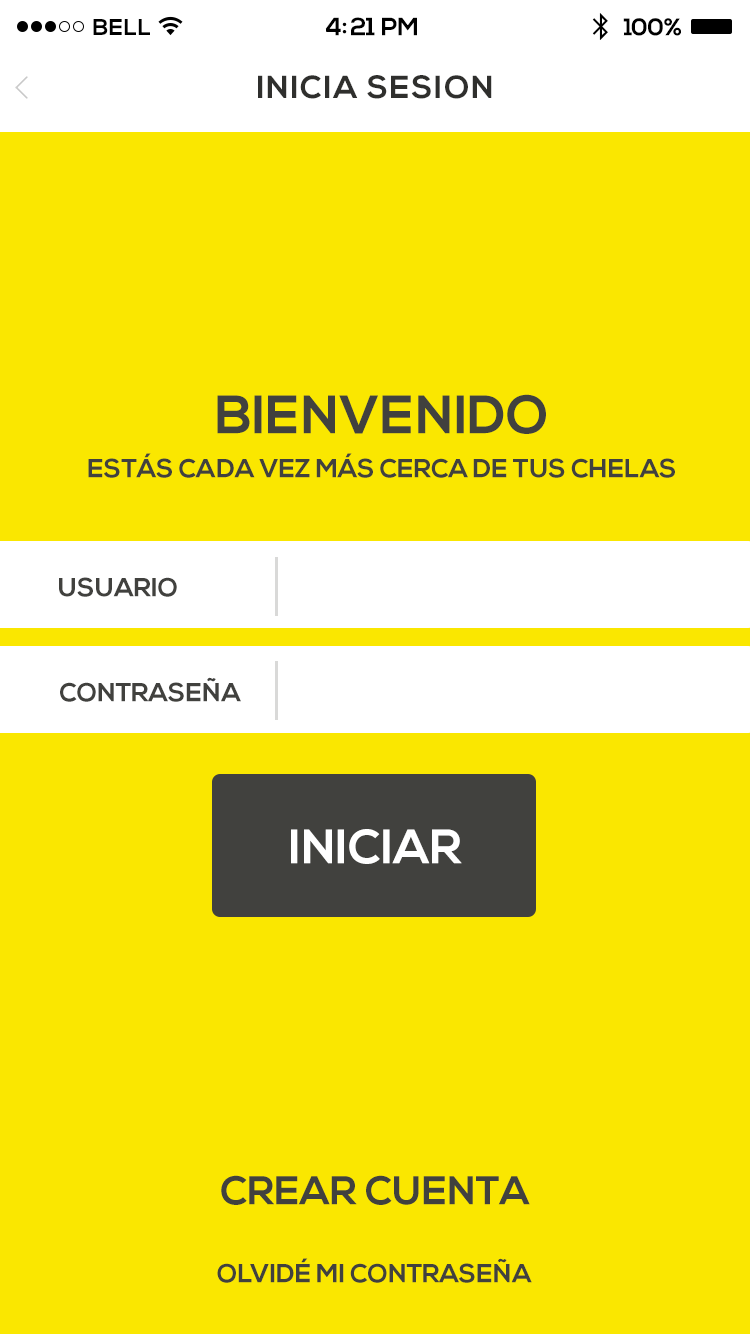
<style>
.page{position:relative;width:750px;height:1334px;background:#fae700}
.page>*{position:absolute;margin:0}
.t1{font:25px "NexaBold";letter-spacing:-0.02em;color:#000000}
.t2{font:23px "NexaBold";letter-spacing:0.02em;color:#000000}
.t3{font:24px "NexaBold";letter-spacing:-0.02em;color:#000000}
.t4{font:31.7px "NexaBold";letter-spacing:0.05em;color:#2f2f2d}
.t5{font:54px "NexaBold";color:#41413e}
.t6{font:26px "NexaBold";color:#41413e}
.t7{font:48px "NexaBold";color:#ffffff}
.t8{font:40px "NexaBold";color:#41413e}
</style>
<div class="page">
<p class="t1" style="left:325px;top:17px;width:92px;height:19px">4:21 PM</p>
<p class="t2" style="left:93px;top:19px;width:57px;height:16px">BELL</p>
<p class="t3" style="left:623px;top:18px;width:58px;height:18px">100%</p>
<p class="t4" style="left:258px;top:75px;width:234px;height:24px">INICIA SESION</p>
<p class="t5" style="left:217px;top:394px;width:329px;height:40px">BIENVENIDO</p>
<p class="t6" style="left:88px;top:453px;width:587px;height:25px">ESTÁS CADA VEZ MÁS CERCA DE TUS CHELAS</p>
<p class="t6" style="left:59px;top:577px;width:118px;height:20px">USUARIO</p>
<p class="t6" style="left:60px;top:677px;width:181px;height:25px">CONTRASEÑA</p>
<p class="t7" style="left:291px;top:829px;width:171px;height:35px">INICIAR</p>
<p class="t8" style="left:221px;top:1175px;width:309px;height:30px">CREAR CUENTA</p>
<p class="t6" style="left:217px;top:1258px;width:315px;height:25px">OLVIDÉ MI CONTRASEÑA</p>
</div>
